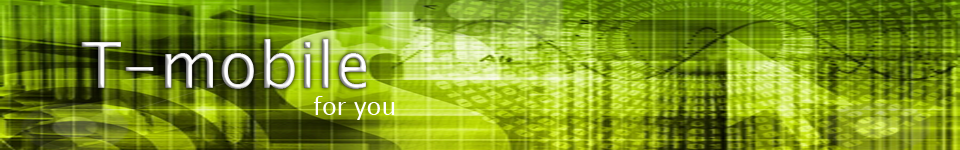
<style>
.page{position:relative;width:960px;height:150px}
.page>*{position:absolute;margin:0}
.t1{font:64px "LucidaSansUnicode"}
.t2{font:24px "LucidaSansUnicode";color:#ffffff}
</style>
<div class="page">
<p class="t1" style="left:81px;top:39px;width:286px;height:50px">T-mobile</p>
<p class="t2" style="left:313px;top:96px;width:82px;height:24px">for you</p>
</div>
